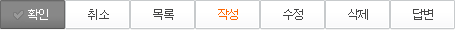
<style>
.page{position:relative;width:455px;height:30px;background:#ffffff}
.page>*{position:absolute;margin:0}
.t1{font:12px "Dotum";letter-spacing:-0.1em;color:#ffffff}
.t2{font:12px "Dotum";letter-spacing:-0.1em;color:#454545}
.t3{font:12px "Dotum";letter-spacing:-0.1em;color:#ff6600}
</style>
<div class="page">
<p class="t1" style="left:28px;top:9px;width:20px;height:11px">확인</p>
<p class="t2" style="left:88px;top:9px;width:21px;height:11px">취소</p>
<p class="t2" style="left:153px;top:9px;width:21px;height:11px">목록</p>
<p class="t3" style="left:218px;top:9px;width:20px;height:11px">작성</p>
<p class="t2" style="left:283px;top:9px;width:20px;height:11px">수정</p>
<p class="t2" style="left:348px;top:9px;width:20px;height:11px">삭제</p>
<p class="t2" style="left:413px;top:9px;width:20px;height:11px">답변</p>
</div>
